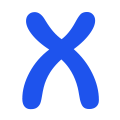
<style>
.page{position:relative;width:120px;height:120px;background:#ffffff}
.page>*{position:absolute;margin:0}
.t1{font:138.3px "464-CAI978";letter-spacing:0.05em;color:#1e53ed}
</style>
<div class="page">
<p class="t1" style="left:22px;top:12px;width:77px;height:98px">X</p>
</div>
